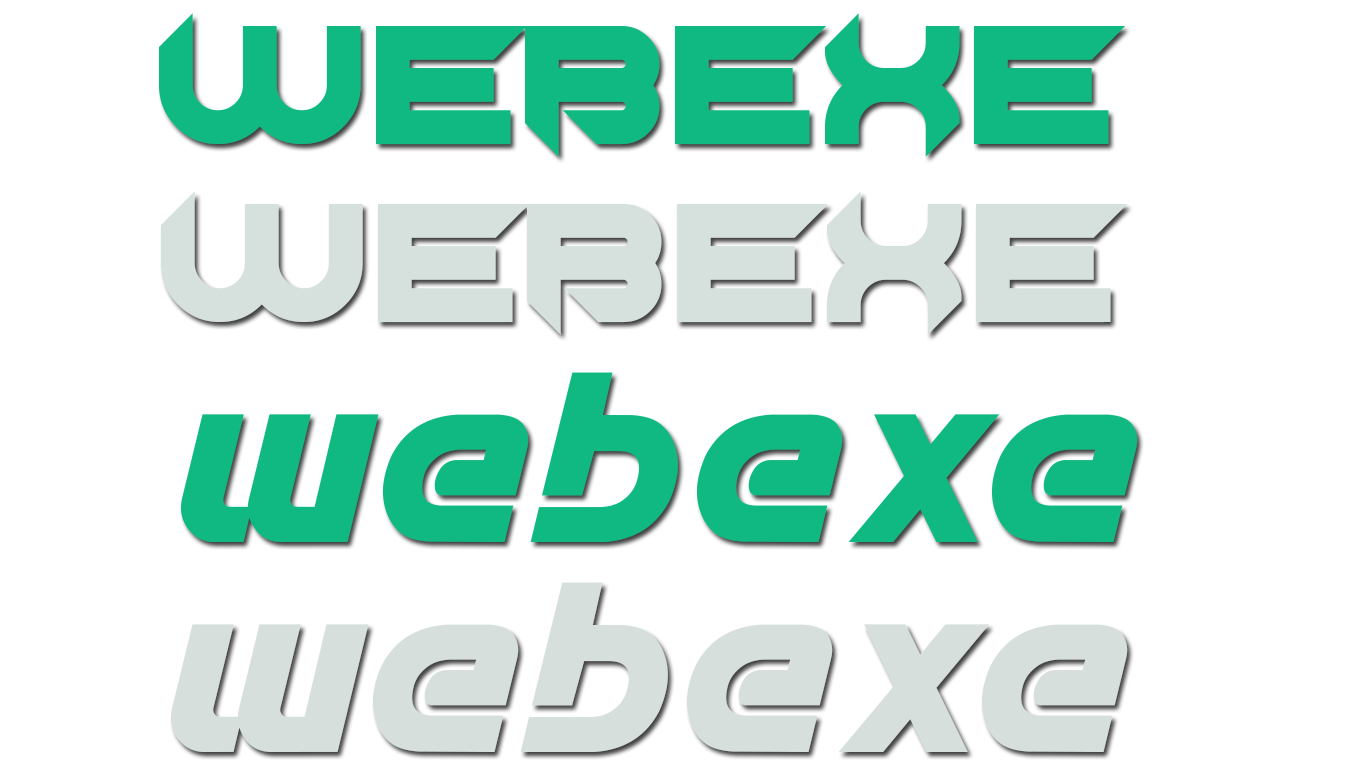
<style>
.page{position:relative;width:1366px;height:768px;background:#ffffff}
.page>*{position:absolute;margin:0}
.t1{font:172px "Chopsic";letter-spacing:0.04em;color:#10b981}
.t2{font:257px "Spantaran";letter-spacing:0.04em;color:#10b981}
.t3{font:257px "Spantaran";letter-spacing:0.04em;color:#d6dfdc}
</style>
<div class="page">
<p class="t1" style="left:159px;top:13px;width:967px;height:144px">webexe</p>
<p class="t2" style="left:180px;top:372px;width:958px;height:170px">webexe</p>
<p class="t3" style="left:170px;top:582px;width:958px;height:170px">webexe</p>
</div>
